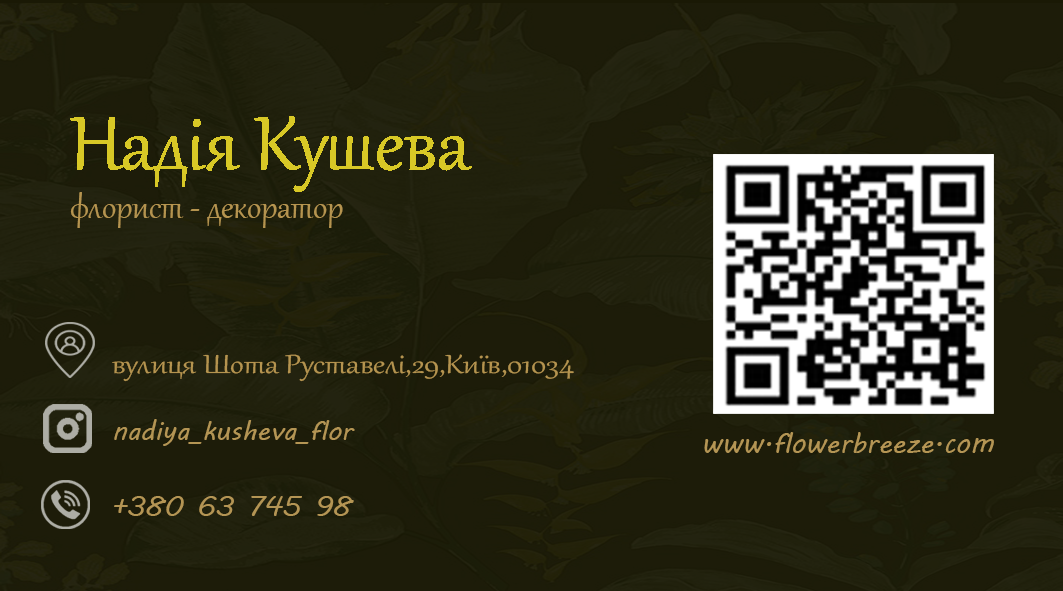
<style>
.page{position:relative;width:1063px;height:591px;background:#1d1c09}
.page>*{position:absolute;margin:0}
.t1{font:39.6px "Gabriola";color:#b5944f}
.t2{font:32.3px "Gabriola";color:#b5944f;scale:1.18 1}
.t3{font:27.1px "MVBoli";color:#b49554}
.t4{font:27.8px "MVBoli";color:#b49554}
.t5{font:27.7px "MVBoli";color:#b49554}
</style>
<div class="page">
<p class="t1" style="left:70px;top:192px;width:273px;height:36px">флорист - декоратор</p>
<p class="t2" style="left:112px;top:354px;width:462px;height:28px">вулиця Шота Руставелі,29,Київ,01034</p>
<p class="t3" style="left:114px;top:419px;width:241px;height:27px">nadiya_kusheva_flora</p>
<p class="t4" style="left:704px;top:432px;width:290px;height:21px">www.flowerbreeze.com</p>
<p class="t5" style="left:114px;top:496px;width:240px;height:20px">+380 63 745 98 90</p>
</div>
